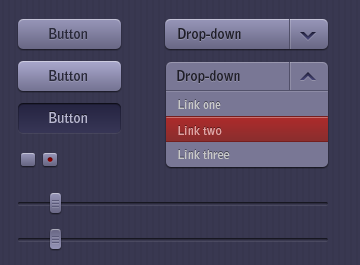
<style>
.page{position:relative;width:360px;height:265px;background:#393851}
.page>*{position:absolute;margin:0}
.t1{font:14px "BellGothicStd-Bold";color:#292939}
.t2{font:14px "BellGothicStd-Bold";color:#1f1e28}
.t3{font:12px "BellGothicStd-Bold";color:#c8c8c8}
.t4{font:14px "BellGothicStd-Bold";color:#b8b7d0}
.t5{font:12px "BellGothicStd-Bold";color:#e1a3a3}
</style>
<div class="page">
<p class="t1" style="left:49px;top:28px;width:38px;height:11px">Button</p>
<p class="t2" style="left:178px;top:28px;width:63px;height:13px">Drop-down</p>
<p class="t1" style="left:49px;top:70px;width:38px;height:11px">Button</p>
<p class="t2" style="left:177px;top:70px;width:63px;height:13px">Drop-down</p>
<p class="t3" style="left:178px;top:100px;width:43px;height:9px">Link one</p>
<p class="t4" style="left:49px;top:112px;width:38px;height:11px">Button</p>
<p class="t5" style="left:178px;top:126px;width:44px;height:9px">Link two</p>
<p class="t3" style="left:178px;top:150px;width:52px;height:9px">Link three</p>
</div>
